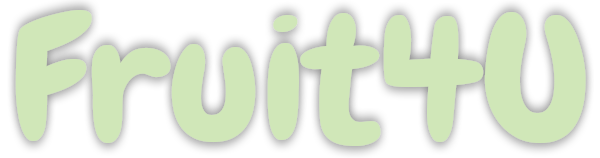
<style>
.page{position:relative;width:600px;height:158px;background:#d0e7b8}
.page>*{position:absolute;margin:0}
.t1{font:172.9px "Chewy-Regular";color:#d0e7b8;scale:1.11 1}
</style>
<div class="page">
<p class="t1" style="left:15px;top:10px;width:571px;height:136px">Fruit4U</p>
</div>
